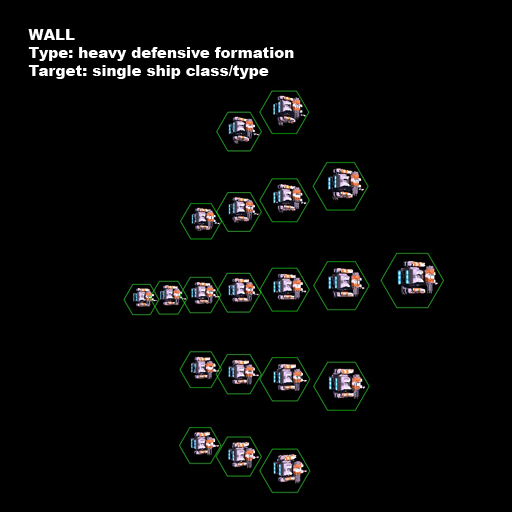
<style>
.page{position:relative;width:512px;height:512px;background:#000000}
.page>*{position:absolute;margin:0}
.t1{font:15px "Arial-Black";color:#ffffff}
</style>
<div class="page">
<p class="t1" style="left:28px;top:29px;width:266px;height:50px">WALL<br>Type: heavy defensive formation<br>Target: single ship class/type</p>
</div>
